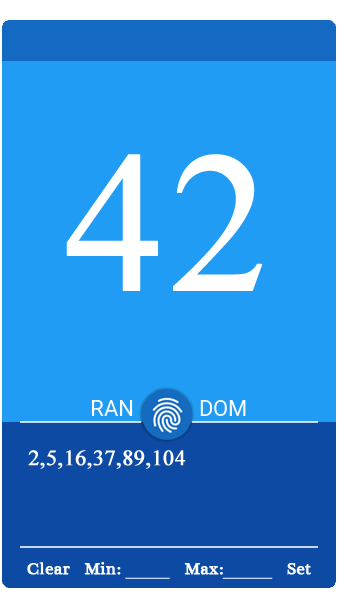
<style>
.page{position:relative;width:338px;height:600px;background:#219cf5}
.page>*{position:absolute;margin:0}
.t1{font:200px "IskoolaPota";color:#ffffff;font-weight:bold}
.t2{font:22px "IskoolaPota";color:#ffffff;font-weight:bold}
.t3{font:17px "PlantagenetCherokee";color:#fefeff;font-weight:bold}
</style>
<div class="page">
<p class="t1" style="left:66px;top:154px;width:197px;height:137px">42</p>
<p class="t2" style="left:28px;top:450px;width:158px;height:19px">2,5,16,37,89,104</p>
<p class="t3" style="left:27px;top:562px;width:284px;height:17px">Clear   Min:             Max:             Set</p>
</div>
